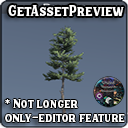
<style>
.page{position:relative;width:128px;height:128px}
.page>*{position:absolute;margin:0}
.t1{font:14px "HanleyPro-Block";color:#ffffff}
.t2{font:12px "HanleyPro-Block";color:#ffffff}
</style>
<div class="page">
<p class="t1" style="left:8px;top:5px;width:116px;height:11px">GetAssetPreview</p>
<p class="t2" style="left:5px;top:99px;width:120px;height:23px">* Not longer <br>only-editor feature</p>
</div>
